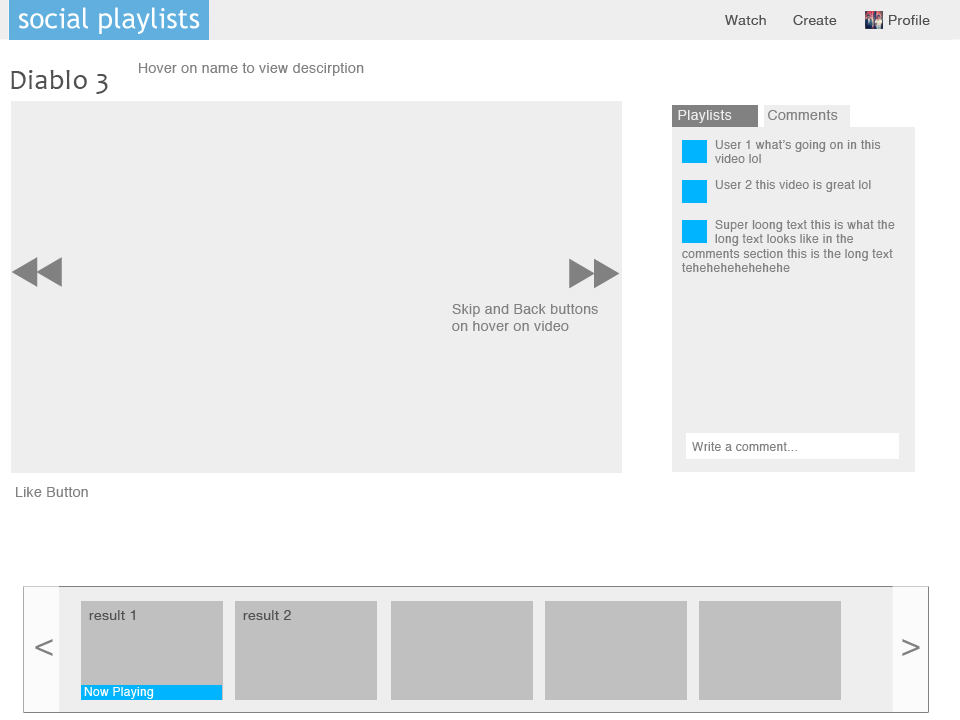
<style>
.page{position:relative;width:960px;height:720px;background:#eeeeee}
.page>*{position:absolute;margin:0}
.t1{font:14px "HelveticaNeue";letter-spacing:0.025em;color:#515151}
.t2{font:14px "Helvetica";letter-spacing:0.025em;color:#818181}
.t3{font:28px "Candara";letter-spacing:0.025em;color:#515151}
.t4{font:14px "Helvetica";letter-spacing:0.025em;color:#eeeeee}
.t5{font:12px "Helvetica";letter-spacing:0.025em;color:#818181}
.t6{font:30px "Helvetica";letter-spacing:0.025em;color:#818181}
.t7{font:12px "Helvetica";letter-spacing:0.025em;color:#ffffff}
</style>
<div class="page">
<p class="t1" style="left:725px;top:15px;width:41px;height:10px">Watch</p>
<p class="t1" style="left:793px;top:15px;width:44px;height:10px">Create</p>
<p class="t1" style="left:889px;top:15px;width:41px;height:10px">Profile</p>
<p class="t2" style="left:139px;top:63px;width:225px;height:13px">Hover on name to view descirption</p>
<p class="t3" style="left:11px;top:70px;width:97px;height:24px">Diablo 3</p>
<p class="t4" style="left:678px;top:110px;width:54px;height:13px">Playlists</p>
<p class="t2" style="left:768px;top:110px;width:70px;height:10px">Comments</p>
<p class="t5" style="left:715px;top:140px;width:166px;height:23px">User 1 what’s going on in this<br>video lol</p>
<p class="t5" style="left:715px;top:180px;width:156px;height:12px">User 2 this video is great lol</p>
<p class="t5" style="left:715px;top:220px;width:180px;height:26px">Super loong text this is what the<br>long text looks like in the</p>
<p class="t5" style="left:682px;top:249px;width:211px;height:23px">comments section this is the long text<br>tehehehehehehehe</p>
<p class="t2" style="left:452px;top:304px;width:146px;height:27px">Skip and Back buttons <br>on hover on video</p>
<p class="t5" style="left:692px;top:442px;width:105px;height:9px">Write a comment...</p>
<p class="t2" style="left:16px;top:487px;width:72px;height:10px">Like Button</p>
<p class="t1" style="left:89px;top:610px;width:46px;height:10px">result 1</p>
<p class="t1" style="left:243px;top:610px;width:48px;height:10px">result 2</p>
<p class="t6" style="left:35px;top:639px;width:18px;height:17px">&lt;</p>
<p class="t6" style="left:902px;top:639px;width:18px;height:17px">&gt;</p>
<p class="t7" style="left:84px;top:687px;width:70px;height:12px">Now Playing</p>
</div>
